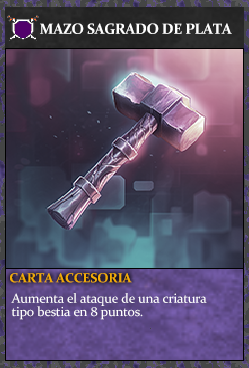
<style>
.page{position:relative;width:249px;height:368px}
.page>*{position:absolute;margin:0}
.t1{font:14.7px "Constantia-Bold";letter-spacing:-0.02em;color:#ffffff}
.t2{font:13.3px "Constantia-Bold";letter-spacing:-0.02em;color:#f2ac05}
.t3{font:13.3px/13.3px "Constantia";letter-spacing:-0.02em;color:#ffffff}
</style>
<div class="page">
<p class="t1" style="left:40px;top:23px;width:192px;height:11px">MAZO SAGRADO DE PLATA</p>
<p class="t2" style="left:10px;top:273px;width:122px;height:10px">CARTA ACCESORIA</p>
<p class="t3" style="left:11px;top:293px;width:196px;height:27px">Aumenta el ataque de una criatura<br>tipo bestia en 8 puntos.</p>
</div>
